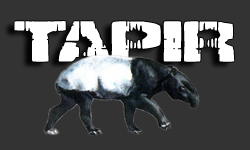
<style>
.page{position:relative;width:250px;height:150px;background:#333333}
.page>*{position:absolute;margin:0}
.t1{font:60px "Decrepit(BRK)";letter-spacing:0.025em;color:#ffffff}
</style>
<div class="page">
<p class="t1" style="left:14px;top:21px;width:221px;height:41px">TAPIR</p>
</div>
